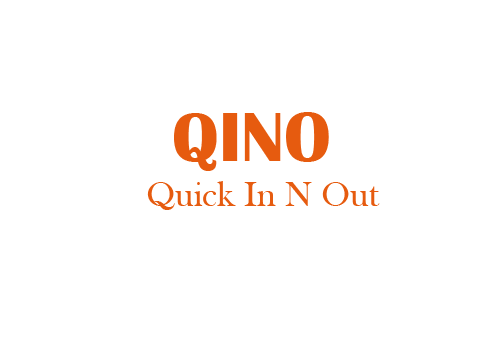
<style>
.page{position:relative;width:504px;height:360px;background:#ffffff}
.page>*{position:absolute;margin:0}
.t1{font:72px "BritannicBold";color:#e65b0f}
.t2{font:36px "BaskOldFace";color:#e65b0f}
</style>
<div class="page">
<p class="t1" style="left:174px;top:112px;width:155px;height:59px">QINO</p>
<p class="t2" style="left:147px;top:181px;width:233px;height:29px">Quick In N Out</p>
</div>
